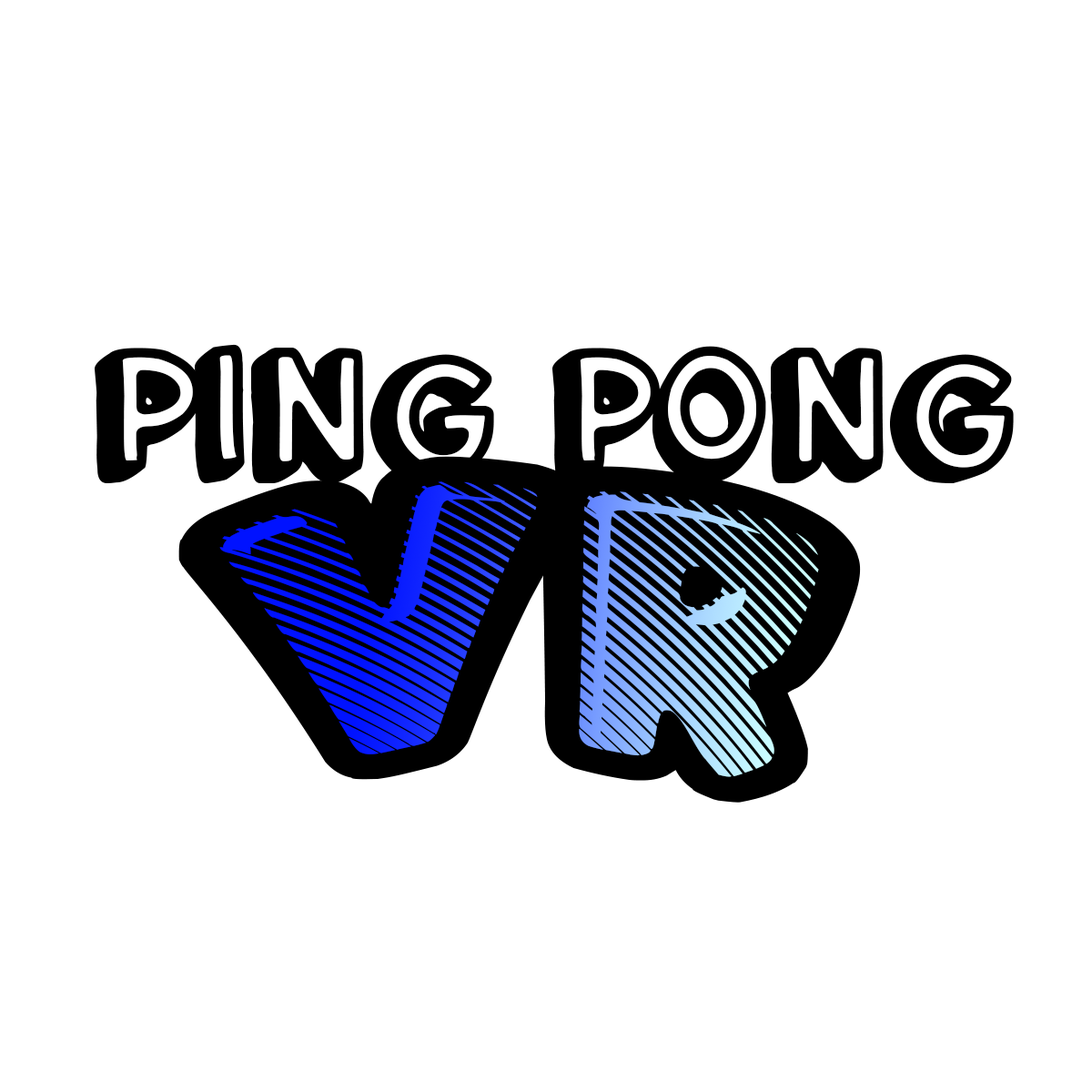
<style>
.page{position:relative;width:1092px;height:1092px;background:#ffffff}
.page>*{position:absolute;margin:0}
.t1{font:208.5px "Schoolgirls";color:#000000}
.t2{font:166.8px "FluoGums";color:#000000}
</style>
<div class="page">
<p class="t1" style="left:95px;top:344px;width:919px;height:139px">ping pong</p>
<p class="t2" style="left:178px;top:456px;width:683px;height:347px;text-align:center">VR</p>
</div>
